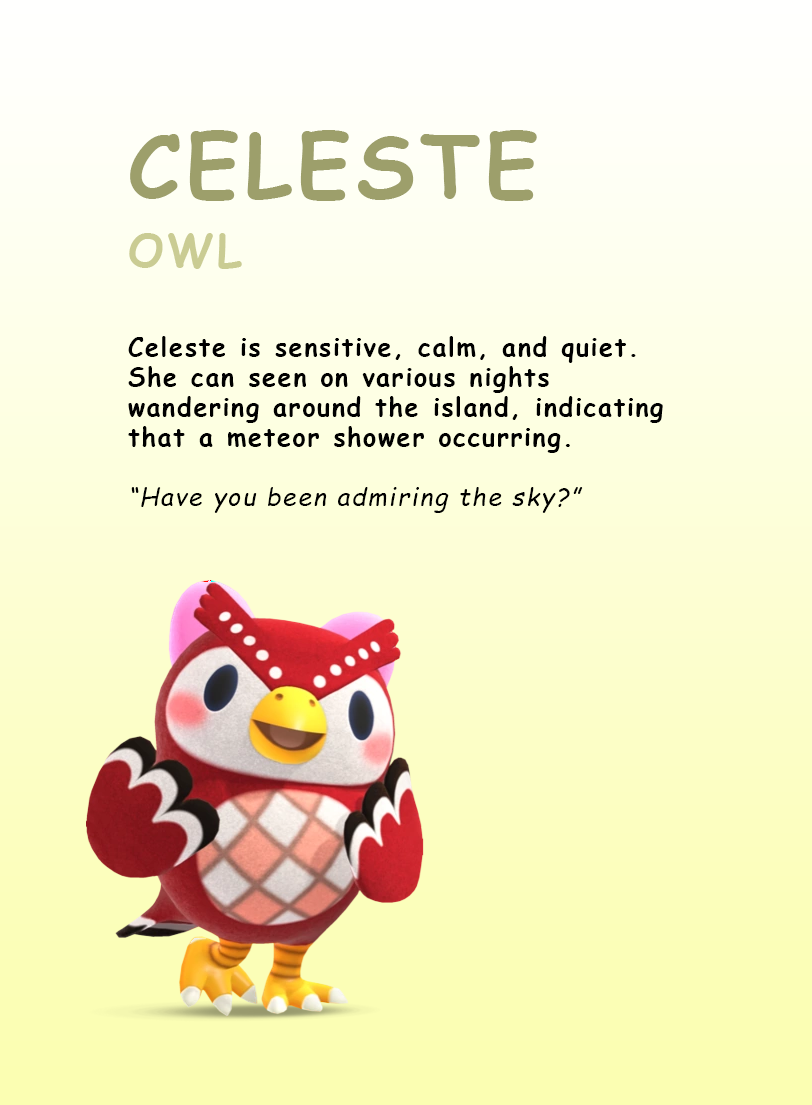
<style>
.page{position:relative;width:812px;height:1105px}
.page>*{position:absolute;margin:0}
.t1{font:85px/70px "ComicSansMS-Bold";letter-spacing:0.065em;color:#9d9f6b}
.t2{font:45px/70px "ComicSansMS-Bold";letter-spacing:0.065em;color:#cacc93}
.t3{font:25px "ComicSansMS-Bold";letter-spacing:0.065em;color:#000000}
.t4{font:25px "ComicSansMS-Italic";letter-spacing:0.065em;color:#000000}
</style>
<div class="page">
<p class="t1" style="left:129px;top:130px;width:408px;height:139px">CELESTE<br><span class="t2">OWL</span></p>
<p class="t3" style="left:128px;top:336px;width:535px;height:177px">Celeste is sensitive, calm, and quiet. She can seen on various nights wandering around the island, indicating that a meteor shower occurring.<br><span class="t4"><br>“Have you been admiring the sky?”</span></p>
</div>
